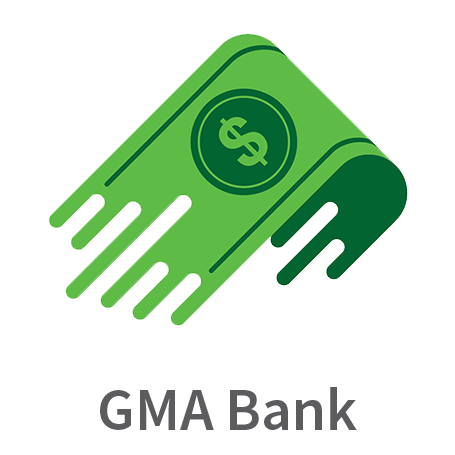
<style>
.page{position:relative;width:455px;height:455px;background:#ffffff}
.page>*{position:absolute;margin:0}
.t1{font:60px "SourceSansPro-Semibold";color:#5c5b5e}
</style>
<div class="page">
<p class="t1" style="left:100px;top:387px;width:257px;height:43px">GMA Bank</p>
</div>
